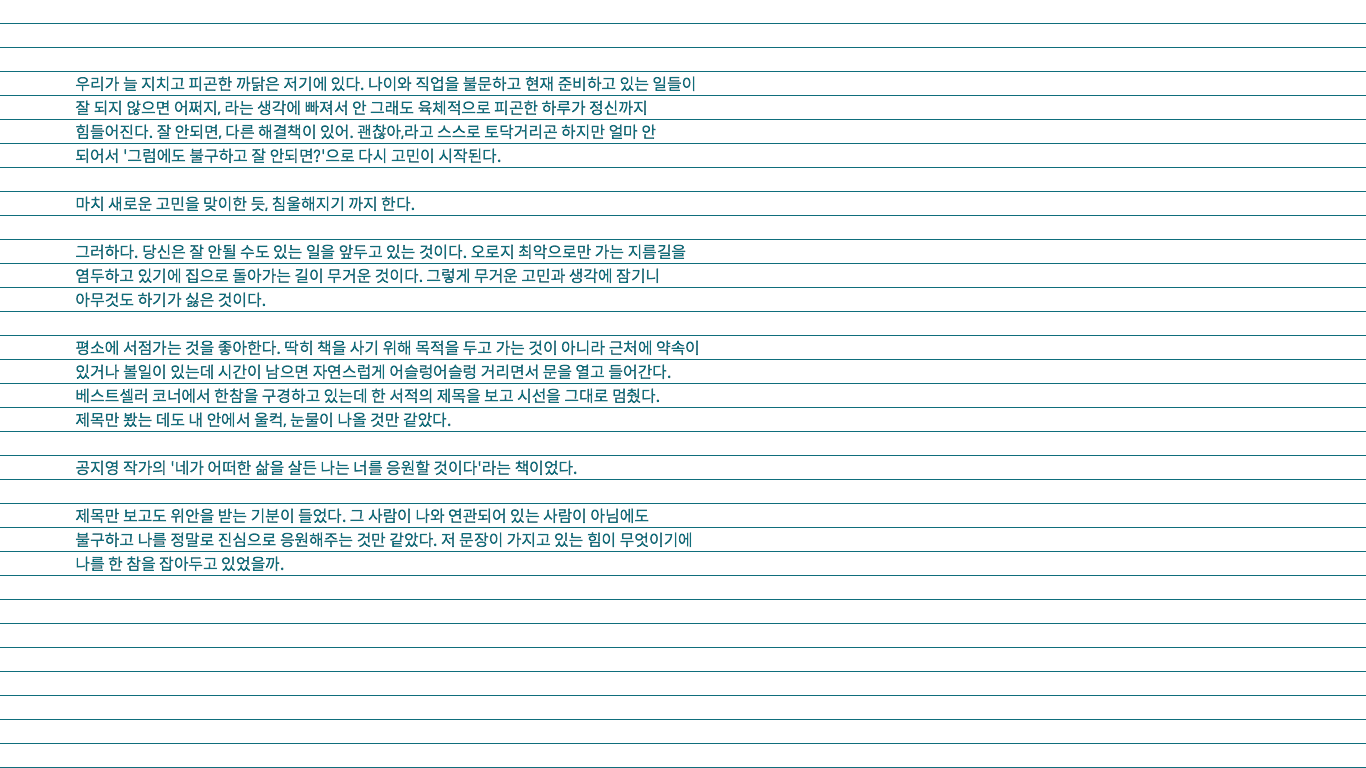
<style>
.page{position:relative;width:1366px;height:768px;background:#ffffff}
.page>*{position:absolute;margin:0}
.t1{font:16px "SpoqaHanSans-Regular";letter-spacing:-0.005em;color:#0f6e7c}
</style>
<div class="page">
<p class="t1" style="left:75px;top:76px;width:623px;height:496px">우리가 늘 지치고 피곤한 까닭은 저기에 있다. 나이와 직업을 불문하고 현재 준비하고 있는 일들이 잘 되지 않으면 어쩌지, 라는 생각에 빠져서 안 그래도 육체적으로 피곤한 하루가 정신까지 힘들어진다. 잘 안되면, 다른 해결책이 있어. 괜찮아,라고 스스로 토닥거리곤 하지만 얼마 안 되어서 '그럼에도 불구하고 잘 안되면?'으로 다시 고민이 시작된다. <br>마치 새로운 고민을 맞이한 듯, 침울해지기 까지 한다. <br>그러하다. 당신은 잘 안될 수도 있는 일을 앞두고 있는 것이다. 오로지 최악으로만 가는 지름길을 염두하고 있기에 집으로 돌아가는 길이 무거운 것이다. 그렇게 무거운 고민과 생각에 잠기니 아무것도 하기가 싫은 것이다.<br>평소에 서점가는 것을 좋아한다. 딱히 책을 사기 위해 목적을 두고 가는 것이 아니라 근처에 약속이 있거나 볼일이 있는데 시간이 남으면 자연스럽게 어슬렁어슬렁 거리면서 문을 열고 들어간다. 베스트셀러 코너에서 한참을 구경하고 있는데 한 서적의 제목을 보고 시선을 그대로 멈췄다. 제목만 봤는 데도 내 안에서 울컥, 눈물이 나올 것만 같았다.<br>공지영 작가의 '네가 어떠한 삶을 살든 나는 너를 응원할 것이다'라는 책이었다.<br>제목만 보고도 위안을 받는 기분이 들었다. 그 사람이 나와 연관되어 있는 사람이 아님에도 불구하고 나를 정말로 진심으로 응원해주는 것만 같았다. 저 문장이 가지고 있는 힘이 무엇이기에 나를 한 참을 잡아두고 있었을까.</p>
</div>
